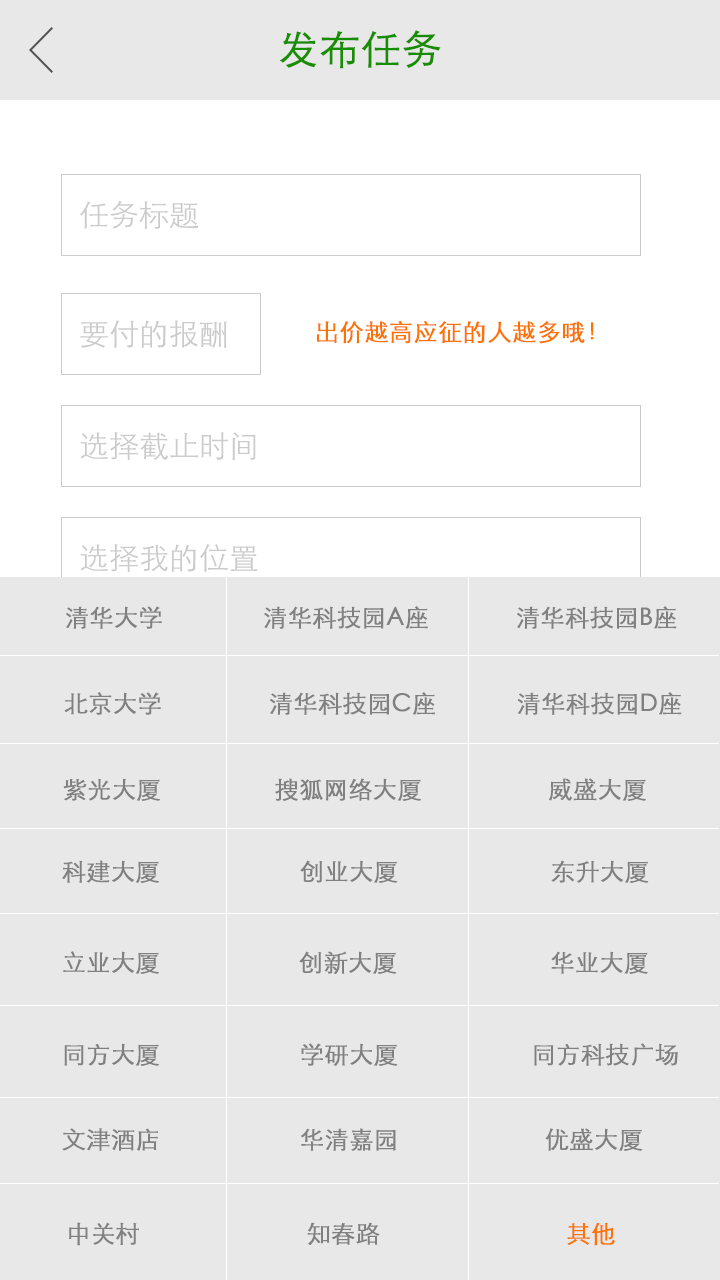
<style>
.page{position:relative;width:720px;height:1280px;background:#e8e8e8}
.page>*{position:absolute;margin:0}
.t1{font:40px "STXihei";color:#178d00;font-weight:bold}
.t2{font:30px "STXihei";color:#cbcbcb}
.t3{font:24px "STXihei";color:#ff7200;font-weight:bold}
.t4{font:24px "STXihei";color:#808080;font-weight:bold}
</style>
<div class="page">
<p class="t1" style="left:280px;top:30px;width:161px;height:39px">发布任务</p>
<p class="t2" style="left:79px;top:201px;width:120px;height:28px">任务标题</p>
<p class="t2" style="left:80px;top:320px;width:147px;height:28px">要付的报酬</p>
<p class="t3" style="left:317px;top:321px;width:277px;height:23px">出价越高应征的人越多哦！</p>
<p class="t2" style="left:80px;top:432px;width:176px;height:28px">选择截止时间</p>
<p class="t2" style="left:80px;top:544px;width:178px;height:28px">选择我的位置</p>
<p class="t4" style="left:66px;top:606px;width:611px;height:23px">清华大学               清华科技园A座             清华科技园B座</p>
<p class="t4" style="left:64px;top:692px;width:618px;height:23px">北京大学                清华科技园C座            清华科技园D座</p>
<p class="t4" style="left:63px;top:778px;width:583px;height:23px">紫光大厦                 搜狐网络大厦                   威盛大厦</p>
<p class="t4" style="left:62px;top:860px;width:587px;height:23px">科建大厦                     创业大厦                      东升大厦</p>
<p class="t4" style="left:63px;top:951px;width:585px;height:23px">立业大厦                创新大厦                       华业大厦</p>
<p class="t4" style="left:64px;top:1043px;width:614px;height:23px">同方大厦                     学研大厦                    同方科技广场</p>
<p class="t4" style="left:62px;top:1128px;width:581px;height:23px">文津酒店                     华清嘉园                      优盛大厦</p>
<p class="t4" style="left:69px;top:1222px;width:546px;height:24px">中关村                         知春路                            <span class="t3">其他</span></p>
</div>
